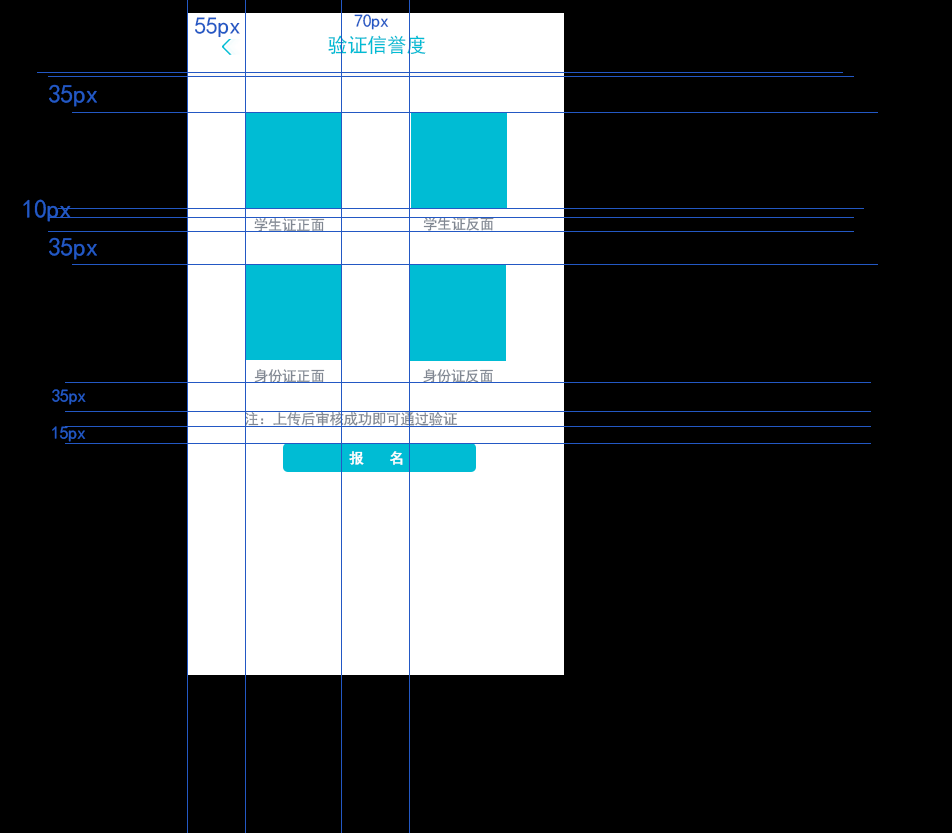
<style>
.page{position:relative;width:952px;height:833px;background:#000000}
.page>*{position:absolute;margin:0}
.t1{font:24px "SimHei";letter-spacing:-0.02em;color:#2358c4}
.t2{font:18px "SimHei";letter-spacing:-0.02em;color:#2358c4}
.t3{font:20.1px "SimHei";letter-spacing:-0.02em;color:#00bcd4}
.t4{font:26px "SimHei";letter-spacing:-0.02em;color:#2358c4}
.t5{font:14.5px "SimHei";letter-spacing:-0.02em;color:#808792}
.t6{font:14.5px "SimHei";letter-spacing:0.02em;color:#ffffff;font-weight:bold}
</style>
<div class="page">
<p class="t1" style="left:195px;top:17px;width:45px;height:21px">55px</p>
<p class="t2" style="left:354px;top:14px;width:35px;height:16px">70px</p>
<p class="t3" style="left:328px;top:35px;width:98px;height:20px">验证信誉度</p>
<p class="t4" style="left:49px;top:84px;width:48px;height:23px">35px</p>
<p class="t4" style="left:23px;top:199px;width:48px;height:23px">10px</p>
<p class="t5" style="left:254px;top:218px;width:71px;height:14px">学生证正面</p>
<p class="t5" style="left:423px;top:217px;width:71px;height:14px">学生证反面</p>
<p class="t4" style="left:49px;top:237px;width:48px;height:23px">35px</p>
<p class="t5" style="left:254px;top:368px;width:71px;height:15px">身份证正面</p>
<p class="t5" style="left:423px;top:368px;width:70px;height:15px">身份证反面</p>
<p class="t2" style="left:52px;top:389px;width:34px;height:16px">35px</p>
<p class="t5" style="left:245px;top:411px;width:213px;height:15px">注：上传后审核成功即可通过验证</p>
<p class="t2" style="left:52px;top:426px;width:34px;height:16px">15px</p>
<p class="t6" style="left:349px;top:451px;width:54px;height:14px">报  名</p>
</div>
